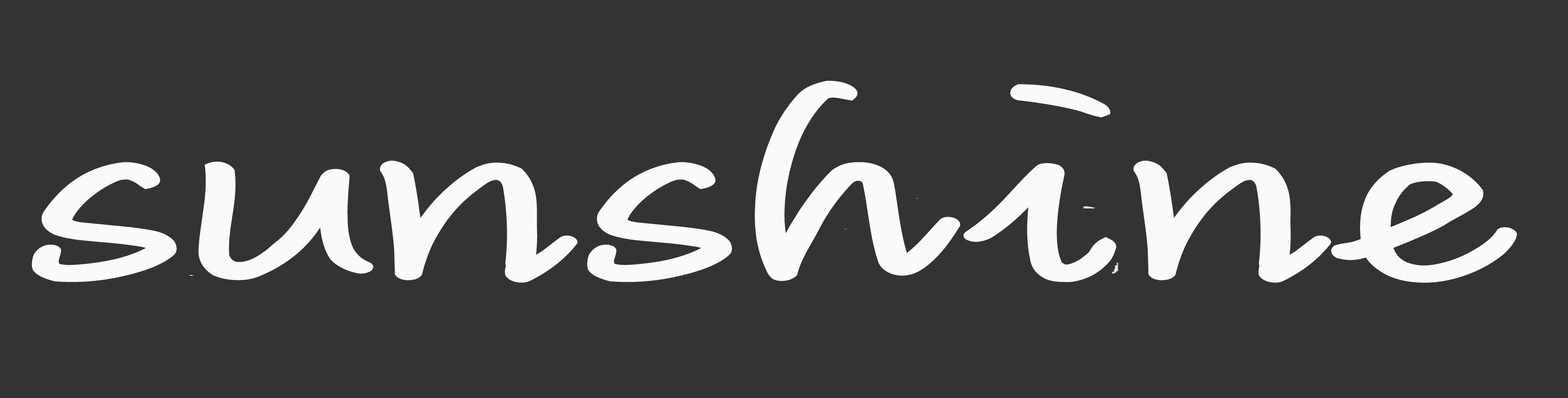
<style>
.page{position:relative;width:1568px;height:398px;background:#333333}
.page>*{position:absolute;margin:0}
.t1{font:288.5px "MLingWaiMedium-SC";color:#fafafa;font-weight:bold;scale:1.71 1}
</style>
<div class="page">
<p class="t1" style="left:32px;top:81px;width:1485px;height:202px">sunshine</p>
</div>
